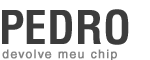
<style>
.page{position:relative;width:150px;height:60px;background:#ffffff}
.page>*{position:absolute;margin:0}
.t1{font:45.4px "HelveticaLTStd-BoldCond";color:#3c3c3c}
.t2{font:12px "HelveticaLTStd-Roman";letter-spacing:0.1em;color:#838383;font-weight:bold}
</style>
<div class="page">
<p class="t1" style="left:2px;top:9px;width:127px;height:36px">PEDRO</p>
<p class="t2" style="left:2px;top:49px;width:115px;height:12px">devolve meu chip</p>
</div>
